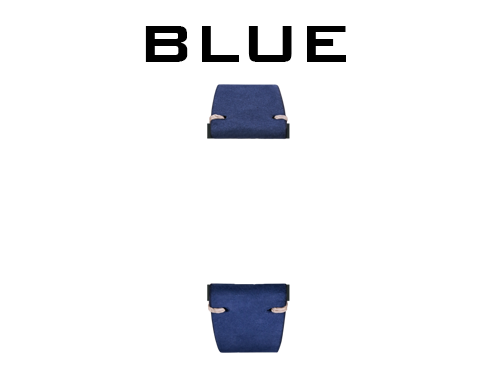
<style>
.page{position:relative;width:480px;height:380px;background:#ffffff}
.page>*{position:absolute;margin:0}
.t1{font:85px "BankGothicBT-Medium";color:#000000}
</style>
<div class="page">
<p class="t1" style="left:145px;top:26px;width:201px;height:36px">blue</p>
</div>
